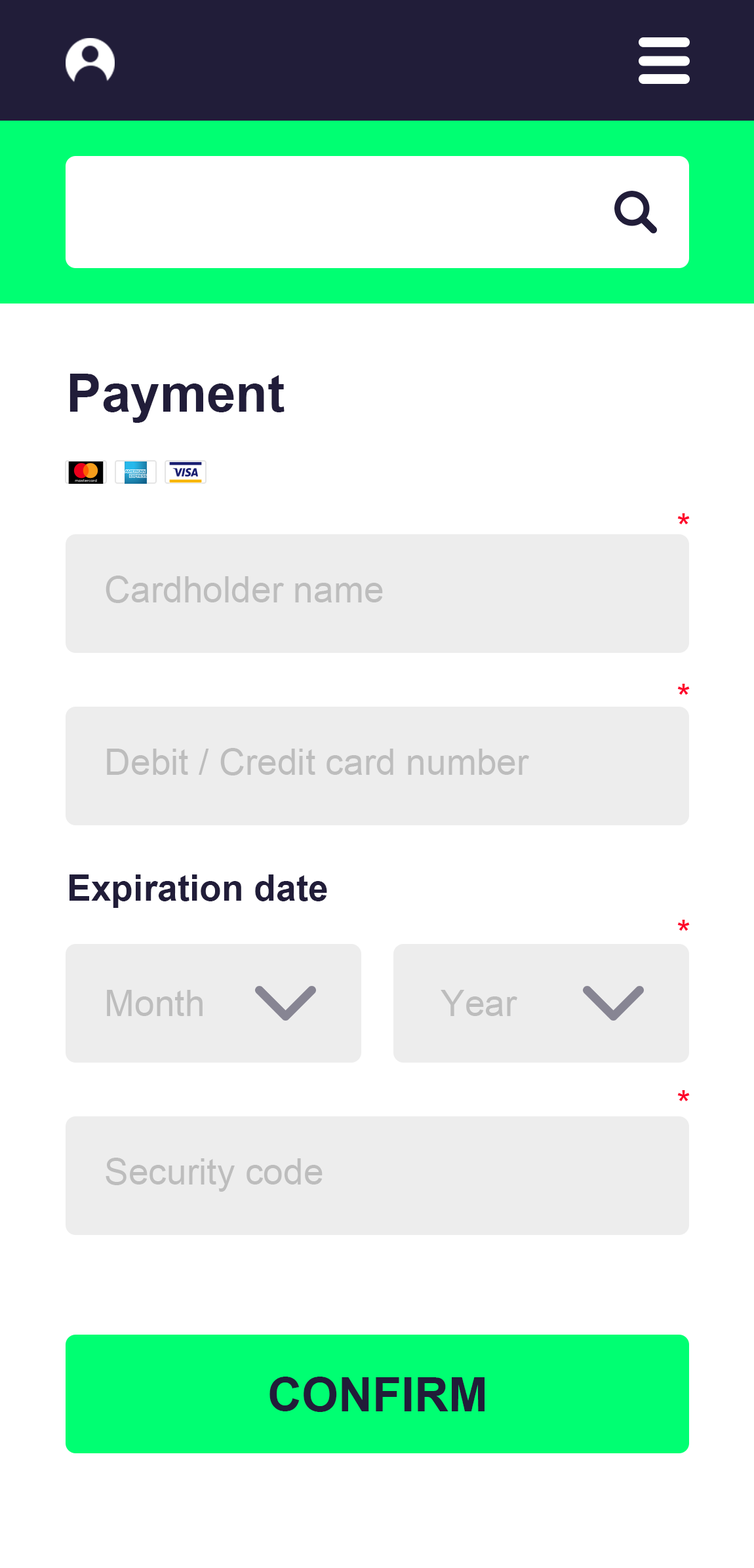
<style>
.page{position:relative;width:754px;height:1568px;background:#ffffff}
.page>*{position:absolute;margin:0}
.t1{font:52.4px "Arial-BoldMT";color:#211d39}
.t2{font:36.2px "ArialMT";color:#fe002a}
.t3{font:36.2px "ArialMT";color:#bdbdbd}
.t4{font:36.2px "Arial-BoldMT";color:#211d39}
.t5{font:47.2px "Arial-BoldMT";color:#211d39}
</style>
<div class="page">
<p class="t1" style="left:69px;top:374px;width:215px;height:49px">Payment</p>
<p class="t2" style="left:677px;top:513px;width:13px;height:11px">*</p>
<p class="t3" style="left:106px;top:576px;width:277px;height:27px">Cardholder name</p>
<p class="t2" style="left:677px;top:684px;width:13px;height:11px">*</p>
<p class="t3" style="left:107px;top:748px;width:422px;height:27px">Debit / Credit card number</p>
<p class="t4" style="left:69px;top:874px;width:258px;height:34px">Expiration date</p>
<p class="t2" style="left:677px;top:920px;width:13px;height:11px">*</p>
<p class="t3" style="left:107px;top:990px;width:96px;height:26px">Month</p>
<p class="t3" style="left:441px;top:990px;width:76px;height:26px">Year</p>
<p class="t2" style="left:677px;top:1090px;width:13px;height:11px">*</p>
<p class="t3" style="left:106px;top:1158px;width:217px;height:34px">Security code</p>
<p class="t5" style="left:269px;top:1377px;width:215px;height:35px">CONFIRM</p>
</div>
